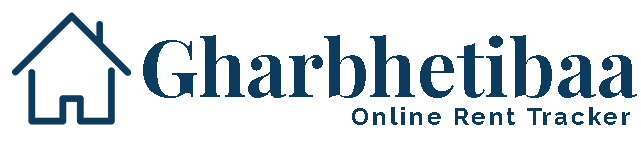
<style>
.page{position:relative;width:641px;height:143px;background:#ffffff}
.page>*{position:absolute;margin:0}
.t1{font:79.3px "PlayfairDisplay-Bold";color:#0b3c5d}
.t2{font:24.4px "Raleway-Bold";letter-spacing:0.12em;color:#0b3c5d}
</style>
<div class="page">
<p class="t1" style="left:143px;top:35px;width:494px;height:63px">Gharbhetibaa</p>
<p class="t2" style="left:352px;top:107px;width:278px;height:18px">Online Rent Tracker</p>
</div>
